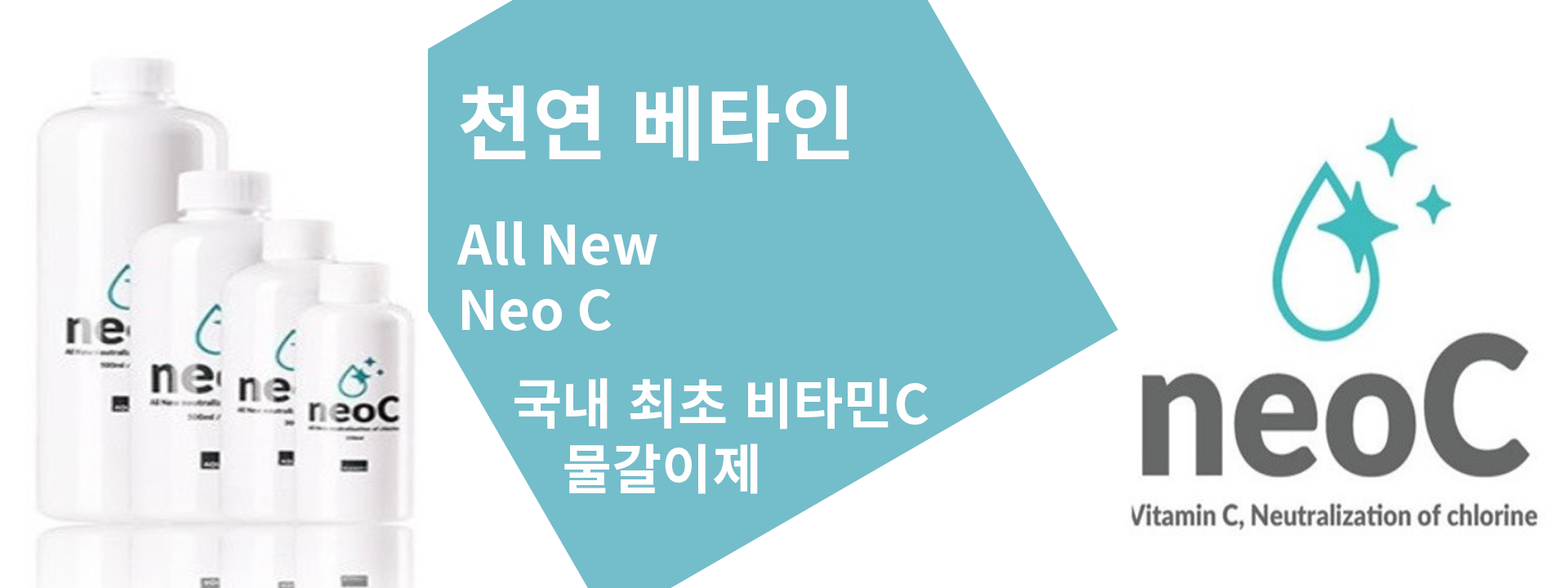
<style>
.page{position:relative;width:1568px;height:588px;background:#ffffff}
.page>*{position:absolute;margin:0}
.t1{font:81.7px "NotoSansKR-Bold";color:#fffefe}
.t2{font:54.4px/65.3px "NotoSansKR-Bold";color:#fffefe}
.t3{font:54.4px "NotoSansKR-Bold";color:#fffefe}
</style>
<div class="page">
<p class="t1" style="left:460px;top:85px;width:389px;height:76px">천연 베타인</p>
<p class="t2" style="left:457px;top:221px;width:200px;height:110px">All New<br>Neo C</p>
<p class="t3" style="left:514px;top:378px;width:415px;height:116px">국내 최초 비타민C<br>    물갈이제</p>
</div>
